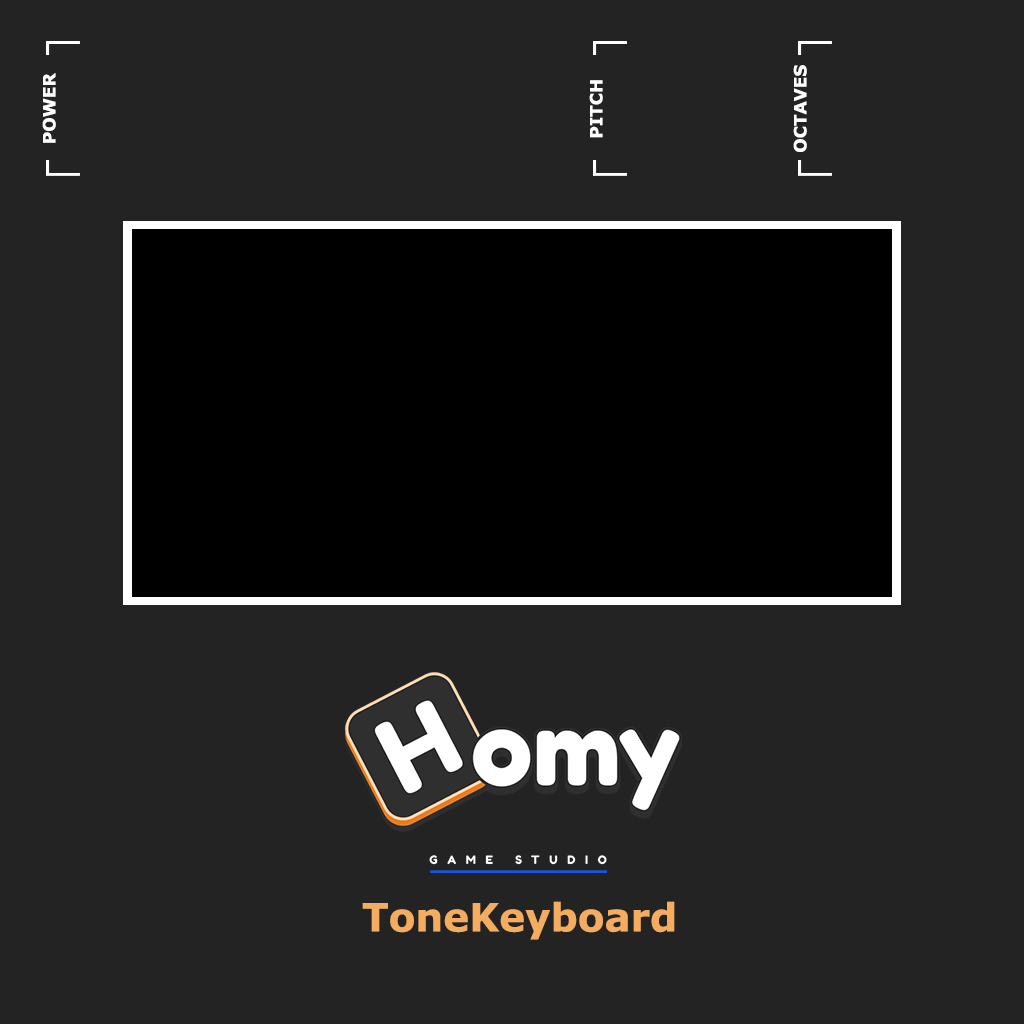
<style>
.page{position:relative;width:1024px;height:1024px;background:#232323}
.page>*{position:absolute;margin:0}
.t1{font:17px "Verdana-Bold";color:#ffffff}
.t2{font:39px "Verdana-Bold";color:#f4ad60}
</style>
<div class="page">
<p class="t1" style="left:793px;top:65px;width:14px;height:87px;rotate:-90deg">OCTAVES</p>
<p class="t1" style="left:42px;top:73px;width:14px;height:70px;rotate:-90deg">POWER</p>
<p class="t1" style="left:589px;top:80px;width:14px;height:58px;rotate:-90deg">PITCH</p>
<p class="t2" style="left:362px;top:901px;width:313px;height:39px">ToneKeyboard</p>
</div>
